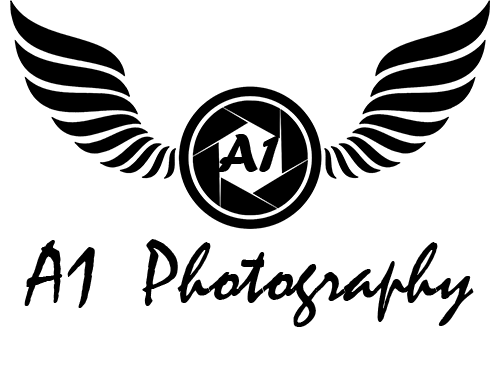
<style>
.page{position:relative;width:500px;height:375px;background:#ffffff}
.page>*{position:absolute;margin:0}
.t1{font:55.9px "ForteMT";color:#000000}
.t2{font:85.6px "Mistral";color:#000000}
</style>
<div class="page">
<p class="t1" style="left:217px;top:134px;width:62px;height:38px">A1</p>
<p class="t2" style="left:24px;top:239px;width:450px;height:88px">A1  Photography</p>
</div>
